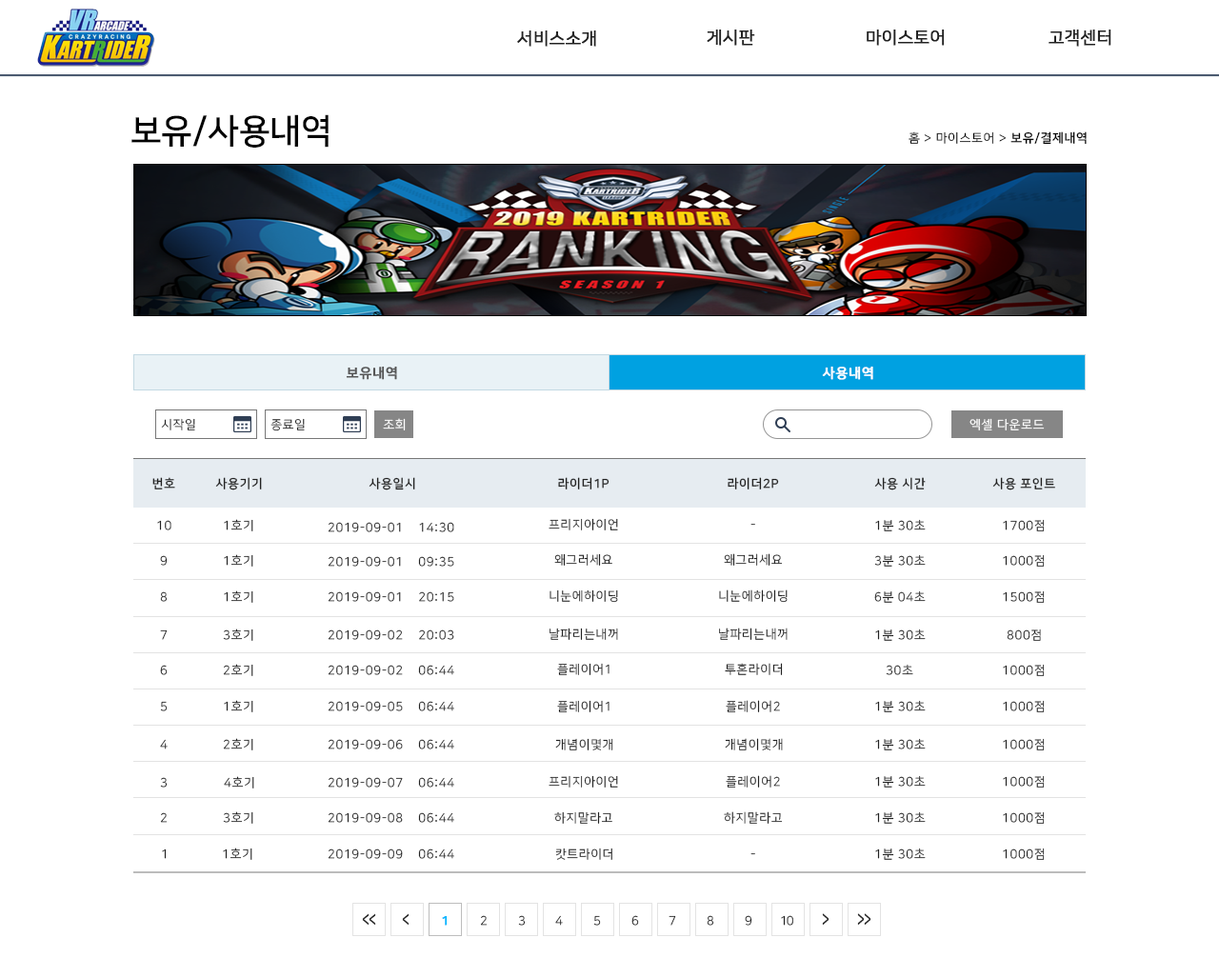
<style>
.page{position:relative;width:1219px;height:978px;background:#ffffff}
.page>*{position:absolute;margin:0}
.t1{font:17.1px "NanumSquareR";color:#222222;font-weight:bold}
.t2{font:34.3px "NanumSquareB";color:#000000}
.t3{font:12.4px "NanumSquareR";letter-spacing:0.05em;color:#000000}
.t4{font:12.4px "NanumSquareB";letter-spacing:0.05em;color:#000000}
.t5{font:13.3px "NanumSquareB";letter-spacing:0.05em;color:#555555;font-weight:bold}
.t6{font:13.3px "NanumSquareB";letter-spacing:0.05em;color:#ffffff;font-weight:bold}
.t7{font:12.4px "NanumSquareR";letter-spacing:0.05em;color:#222222}
.t8{font:12.4px "NanumSquareR";letter-spacing:0.05em;color:#ffffff}
.t9{font:12.4px "NanumSquareB";letter-spacing:0.05em;color:#222222}
.t10{font:12.4px "NanumSquareR";letter-spacing:0.05em}
.t11{font:19.5px "NanumSquareB";letter-spacing:-0.075em;color:#222222;scale:0.63 1}
.t12{font:12.4px "NanumSquareB";letter-spacing:-0.075em;color:#00b6ff;font-weight:bold}
.t13{font:12.4px "NanumSquareR";letter-spacing:-0.075em}
.t14{font:12.4px "NanumSquareR";letter-spacing:-0.075em;color:#222222}
.t15{font:20.1px "NanumSquareB";letter-spacing:-0.075em;color:#222222;scale:0.61 1}
</style>
<div class="page">
<p class="t1" style="left:517px;top:30px;width:79px;height:17px">서비스소개</p>
<p class="t1" style="left:707px;top:29px;width:48px;height:17px">게시판</p>
<p class="t1" style="left:867px;top:29px;width:78px;height:17px">마이스토어</p>
<p class="t1" style="left:1049px;top:29px;width:62px;height:17px">고객센터</p>
<p class="t2" style="left:131px;top:114px;width:198px;height:34px">보유/사용내역</p>
<p class="t3" style="left:909px;top:131px;width:178px;height:14px">홈 &gt; 마이스토어 &gt; <span class="t4">보유/결제내역</span></p>
<p class="t5" style="left:346px;top:366px;width:51px;height:14px">보유내역</p>
<p class="t6" style="left:822px;top:366px;width:51px;height:14px">사용내역</p>
<p class="t7" style="left:161px;top:418px;width:34px;height:12px">시작일</p>
<p class="t7" style="left:270px;top:418px;width:35px;height:13px">종료일</p>
<p class="t8" style="left:383px;top:418px;width:23px;height:12px">조회</p>
<p class="t8" style="left:970px;top:418px;width:75px;height:12px">엑셀 다운로드</p>
<p class="t9" style="left:152px;top:477px;width:23px;height:13px">번호</p>
<p class="t9" style="left:215px;top:477px;width:47px;height:13px">사용기기</p>
<p class="t9" style="left:369px;top:477px;width:46px;height:13px">사용일시</p>
<p class="t9" style="left:558px;top:477px;width:52px;height:13px">라이더1P</p>
<p class="t9" style="left:728px;top:477px;width:51px;height:13px">라이더2P</p>
<p class="t9" style="left:874px;top:477px;width:52px;height:13px">사용 시간</p>
<p class="t9" style="left:992px;top:477px;width:63px;height:13px">사용 포인트</p>
<p class="t7" style="left:157px;top:520px;width:14px;height:10px">10</p>
<p class="t7" style="left:224px;top:519px;width:29px;height:12px">1호기</p>
<p class="t7" style="left:328px;top:522px;width:126px;height:10px">2019-09-01    14:30</p>
<p class="t7" style="left:549px;top:518px;width:69px;height:12px">프리지아이언</p>
<p class="t7" style="left:875px;top:519px;width:51px;height:12px">1분 30초</p>
<p class="t7" style="left:1003px;top:519px;width:42px;height:12px">1700점</p>
<p class="t10" style="left:751px;top:524px;width:4px;height:2px">-</p>
<p class="t7" style="left:160px;top:555px;width:8px;height:11px">9</p>
<p class="t7" style="left:224px;top:554px;width:29px;height:13px">1호기</p>
<p class="t7" style="left:328px;top:556px;width:126px;height:11px">2019-09-01    09:35</p>
<p class="t7" style="left:554px;top:553px;width:58px;height:13px">왜그러세요</p>
<p class="t7" style="left:724px;top:553px;width:59px;height:13px">왜그러세요</p>
<p class="t7" style="left:874px;top:554px;width:52px;height:13px">3분 30초</p>
<p class="t7" style="left:1003px;top:554px;width:42px;height:13px">1000점</p>
<p class="t10" style="left:160px;top:591px;width:8px;height:11px">8</p>
<p class="t7" style="left:224px;top:590px;width:29px;height:13px">1호기</p>
<p class="t7" style="left:328px;top:591px;width:126px;height:11px">2019-09-01    20:15</p>
<p class="t7" style="left:550px;top:590px;width:68px;height:13px">니눈에하이딩</p>
<p class="t7" style="left:719px;top:590px;width:69px;height:13px">니눈에하이딩</p>
<p class="t7" style="left:874px;top:590px;width:52px;height:13px">6분 04초</p>
<p class="t7" style="left:1003px;top:590px;width:42px;height:13px">1500점</p>
<p class="t7" style="left:160px;top:630px;width:8px;height:10px">7</p>
<p class="t7" style="left:223px;top:629px;width:30px;height:12px">3호기</p>
<p class="t7" style="left:328px;top:630px;width:126px;height:10px">2019-09-02    20:03</p>
<p class="t7" style="left:550px;top:628px;width:68px;height:12px">날파리는내꺼</p>
<p class="t7" style="left:719px;top:628px;width:69px;height:12px">날파리는내꺼</p>
<p class="t7" style="left:875px;top:629px;width:51px;height:12px">1분 30초</p>
<p class="t7" style="left:1007px;top:629px;width:34px;height:12px">800점</p>
<p class="t10" style="left:160px;top:665px;width:8px;height:10px">6</p>
<p class="t7" style="left:223px;top:664px;width:30px;height:12px">2호기</p>
<p class="t7" style="left:328px;top:665px;width:126px;height:10px">2019-09-02    06:44</p>
<p class="t7" style="left:557px;top:663px;width:53px;height:12px">플레이어1</p>
<p class="t7" style="left:725px;top:663px;width:58px;height:12px">투혼라이더</p>
<p class="t7" style="left:886px;top:664px;width:27px;height:11px">30초</p>
<p class="t7" style="left:1003px;top:664px;width:42px;height:12px">1000점</p>
<p class="t10" style="left:160px;top:701px;width:8px;height:10px">5</p>
<p class="t7" style="left:224px;top:700px;width:29px;height:12px">1호기</p>
<p class="t7" style="left:328px;top:701px;width:126px;height:10px">2019-09-05    06:44</p>
<p class="t7" style="left:557px;top:700px;width:53px;height:12px">플레이어1</p>
<p class="t7" style="left:726px;top:700px;width:54px;height:12px">플레이어2</p>
<p class="t7" style="left:875px;top:700px;width:51px;height:12px">1분 30초</p>
<p class="t7" style="left:1003px;top:700px;width:42px;height:12px">1000점</p>
<p class="t10" style="left:160px;top:739px;width:8px;height:11px">4</p>
<p class="t7" style="left:223px;top:738px;width:30px;height:13px">2호기</p>
<p class="t7" style="left:328px;top:739px;width:126px;height:11px">2019-09-06    06:44</p>
<p class="t7" style="left:555px;top:738px;width:58px;height:13px">개념이몇개</p>
<p class="t7" style="left:725px;top:738px;width:58px;height:13px">개념이몇개</p>
<p class="t7" style="left:875px;top:738px;width:51px;height:13px">1분 30초</p>
<p class="t7" style="left:1003px;top:738px;width:42px;height:13px">1000점</p>
<p class="t7" style="left:160px;top:777px;width:8px;height:11px">3</p>
<p class="t7" style="left:224px;top:776px;width:30px;height:13px">4호기</p>
<p class="t7" style="left:328px;top:777px;width:126px;height:11px">2019-09-07    06:44</p>
<p class="t7" style="left:549px;top:775px;width:69px;height:13px">프리지아이언</p>
<p class="t7" style="left:726px;top:775px;width:54px;height:13px">플레이어2</p>
<p class="t7" style="left:875px;top:775px;width:51px;height:13px">1분 30초</p>
<p class="t7" style="left:1003px;top:775px;width:42px;height:13px">1000점</p>
<p class="t10" style="left:160px;top:812px;width:8px;height:11px">2</p>
<p class="t7" style="left:223px;top:811px;width:30px;height:13px">3호기</p>
<p class="t7" style="left:328px;top:812px;width:126px;height:11px">2019-09-08    06:44</p>
<p class="t7" style="left:554px;top:811px;width:58px;height:13px">하지말라고</p>
<p class="t7" style="left:724px;top:811px;width:59px;height:13px">하지말라고</p>
<p class="t7" style="left:875px;top:811px;width:51px;height:13px">1분 30초</p>
<p class="t7" style="left:1003px;top:811px;width:42px;height:13px">1000점</p>
<p class="t7" style="left:162px;top:849px;width:5px;height:10px">1</p>
<p class="t7" style="left:223px;top:848px;width:29px;height:12px">1호기</p>
<p class="t7" style="left:328px;top:849px;width:126px;height:10px">2019-09-09    06:44</p>
<p class="t7" style="left:555px;top:848px;width:57px;height:12px">캇트라이더</p>
<p class="t10" style="left:751px;top:853px;width:4px;height:2px">-</p>
<p class="t7" style="left:875px;top:848px;width:51px;height:12px">1분 30초</p>
<p class="t7" style="left:1003px;top:848px;width:42px;height:12px">1000점</p>
<p class="t11" style="left:362px;top:913px;width:14px;height:13px">&lt;&lt;</p>
<p class="t11" style="left:402px;top:913px;width:8px;height:13px">&lt;</p>
<p class="t12" style="left:442px;top:915px;width:6px;height:11px">1</p>
<p class="t13" style="left:480px;top:915px;width:8px;height:11px">2</p>
<p class="t14" style="left:518px;top:915px;width:8px;height:11px">3</p>
<p class="t13" style="left:555px;top:915px;width:8px;height:11px">4</p>
<p class="t13" style="left:593px;top:915px;width:8px;height:11px">5</p>
<p class="t13" style="left:631px;top:915px;width:8px;height:11px">6</p>
<p class="t14" style="left:669px;top:915px;width:7px;height:11px">7</p>
<p class="t13" style="left:707px;top:915px;width:7px;height:11px">8</p>
<p class="t14" style="left:745px;top:915px;width:7px;height:11px">9</p>
<p class="t14" style="left:781px;top:915px;width:12px;height:11px">10</p>
<p class="t15" style="left:822px;top:913px;width:8px;height:13px;rotate:180deg">&lt;</p>
<p class="t15" style="left:857px;top:913px;width:14px;height:13px;rotate:180deg">&lt;&lt;</p>
</div>
